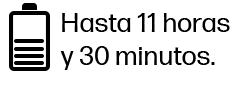
<style>
.page{position:relative;width:248px;height:86px;background:#ffffff}
.page>*{position:absolute;margin:0}
.t1{font:27.1px "FormaDJRMicro-Regular";color:#000000}
</style>
<div class="page">
<p class="t1" style="left:60px;top:13px;width:170px;height:57px">Hasta 11 horas y 30 minutos.</p>
</div>
